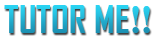
<style>
.page{position:relative;width:155px;height:38px;background:#ffffff}
.page>*{position:absolute;margin:0}
.t1{font:37.5px "AgencyFB-Bold"}
.t2{font:37.5px "CenturySchoolbook-Bold"}
</style>
<div class="page">
<p class="t1" style="left:4px;top:5px;width:146px;height:28px">TUTOR ME<span class="t2">!!</span></p>
</div>
